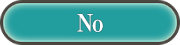
<style>
.page{position:relative;width:180px;height:45px;background:#239e9f}
.page>*{position:absolute;margin:0}
.t1{font:24px "RyuminPro-ExBold";letter-spacing:-0.08em;color:#ffffff;scale:0.9 1}
</style>
<div class="page">
<p class="t1" style="left:77px;top:14px;width:26px;height:18px">No</p>
</div>
